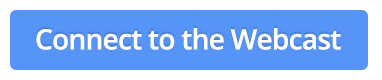
<style>
.page{position:relative;width:382px;height:80px;background:#5695f7}
.page>*{position:absolute;margin:0}
.t1{font:28px "OpenSans-Semibold";letter-spacing:-0.025em;color:#ffffff}
</style>
<div class="page">
<p class="t1" style="left:36px;top:28px;width:305px;height:22px">Connect to the Webcast</p>
</div>
